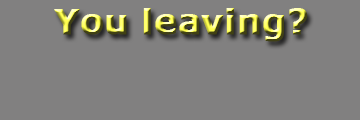
<style>
.page{position:relative;width:360px;height:120px;background:#818080}
.page>*{position:absolute;margin:0}
.t1{font:34px "Verdana-Bold";font-weight:bold}
</style>
<div class="page">
<p class="t1" style="left:54px;top:8px;width:254px;height:34px">You leaving?</p>
</div>
